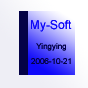
<style>
.page{position:relative;width:88px;height:88px}
.page>*{position:absolute;margin:0}
.t1{font:8px "ArialMT";color:#040247}
</style>
<div class="page">
<p class="t1" style="left:36px;top:43px;width:30px;height:8px">Yingying</p>
<p class="t1" style="left:31px;top:58px;width:40px;height:6px">2006-10-21</p>
</div>
